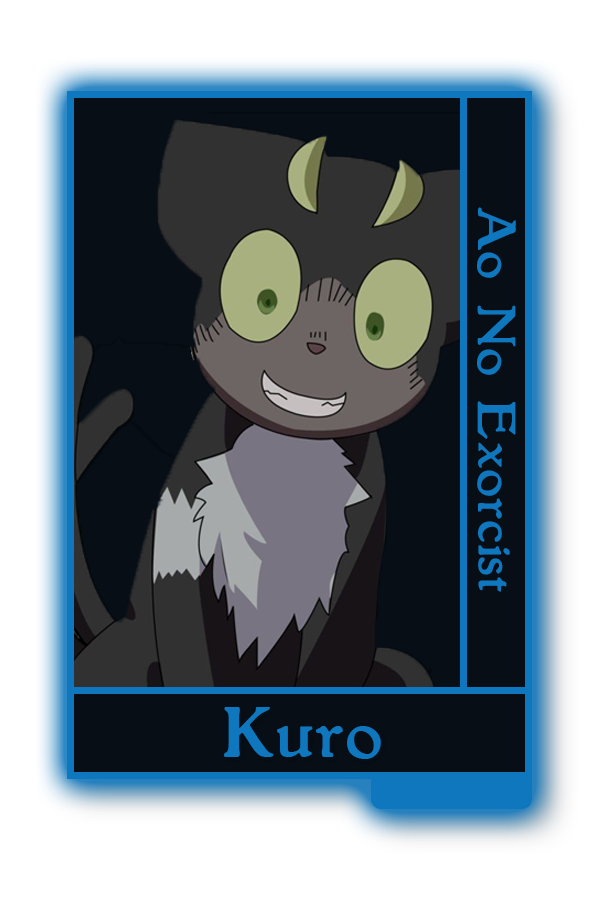
<style>
.page{position:relative;width:600px;height:900px;background:#070e16}
.page>*{position:absolute;margin:0}
.t1{font:48.8px "Grantham-Roman";color:#0f77be}
.t2{font:65.2px "Grantham-Roman";color:#0f77be}
</style>
<div class="page">
<p class="t1" style="left:477px;top:207px;width:39px;height:385px;rotate:90deg">Ao No Exorcist</p>
<p class="t2" style="left:224px;top:707px;width:157px;height:52px">Kuro</p>
</div>
